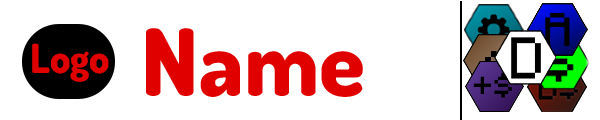
<style>
.page{position:relative;width:600px;height:120px;background:#ffffff}
.page>*{position:absolute;margin:0}
.t1{font:92.7px "Dosis-ExtraBold";color:#e00000}
.t2{font:40.2px "Dosis-ExtraBold";color:#e00000}
</style>
<div class="page">
<p class="t1" style="left:146px;top:28px;width:217px;height:69px">Name</p>
<p class="t2" style="left:32px;top:43px;width:77px;height:39px">Logo</p>
</div>
